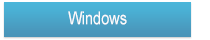
<style>
.page{position:relative;width:210px;height:40px}
.page>*{position:absolute;margin:0}
.t1{font:17.8px "ArialMT";color:#fcfcfc;scale:0.82 1}
</style>
<div class="page">
<p class="t1" style="left:68px;top:11px;width:59px;height:14px">Windows</p>
</div>
